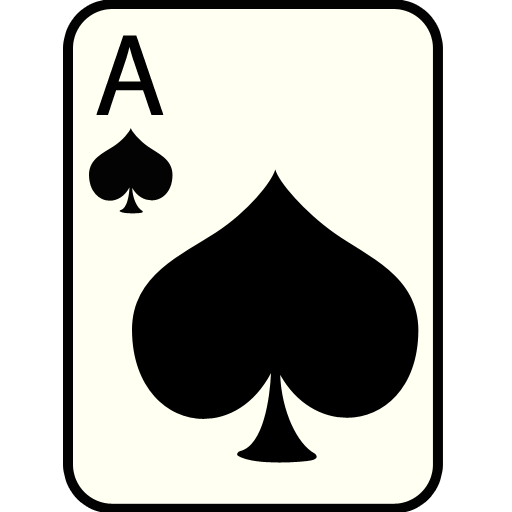
<style>
.page{position:relative;width:512px;height:512px;background:#fffff2}
.page>*{position:absolute;margin:0}
.t1{font:200px "MyriadPro-Regular";letter-spacing:-0.05em;color:#000000;font-variant:small-caps;font-weight:bold}
</style>
<div class="page">
<p class="t1" style="left:96px;top:35px;width:68px;height:80px">A</p>
</div>
